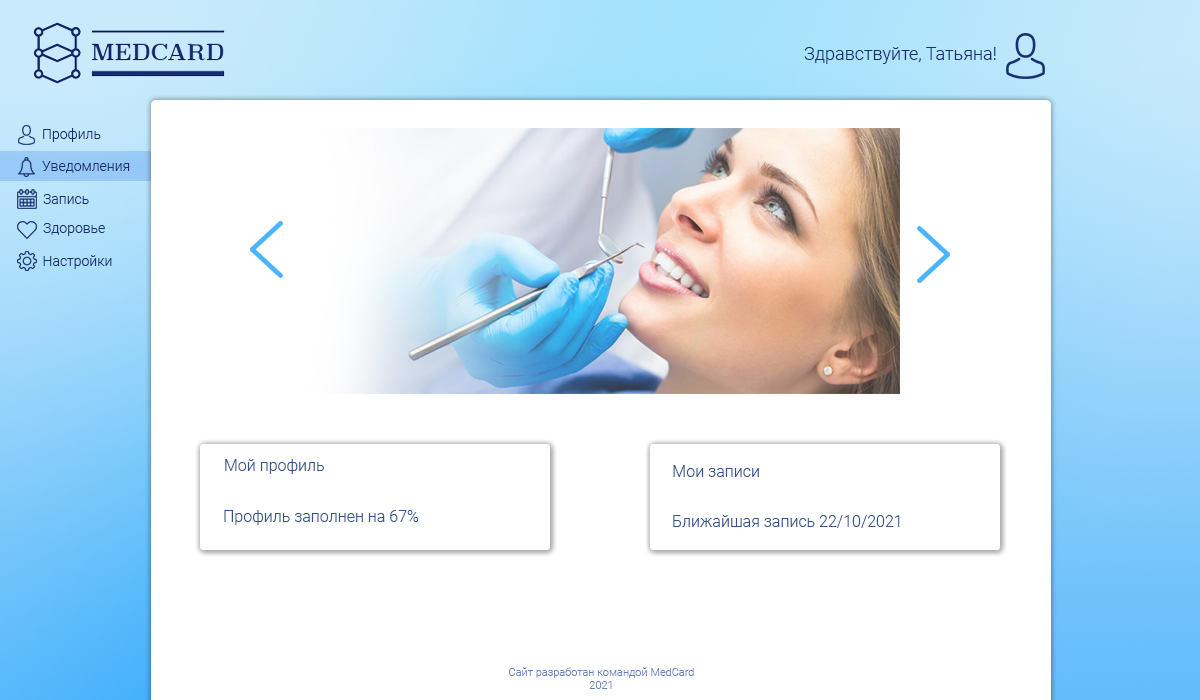
<style>
.page{position:relative;width:1200px;height:700px;background:#ffffff}
.page>*{position:absolute;margin:0}
.t1{font:18px "Roboto-Light";color:#152f70}
.t2{font:14px "Roboto-Light";color:#152f70}
.t3{font:16px "Roboto-Light";color:#35538d}
.t4{font:11px "Roboto-Light";color:#6683bb}
</style>
<div class="page">
<p class="t1" style="left:804px;top:47px;width:192px;height:17px">Здравствуйте, Татьяна!</p>
<p class="t2" style="left:43px;top:128px;width:58px;height:14px">Профиль</p>
<p class="t2" style="left:42px;top:161px;width:88px;height:12px">Уведомления</p>
<p class="t2" style="left:43px;top:194px;width:46px;height:10px">Запись</p>
<p class="t2" style="left:43px;top:223px;width:62px;height:13px">Здоровье</p>
<p class="t2" style="left:43px;top:255px;width:69px;height:14px">Настройки</p>
<p class="t3" style="left:225px;top:459px;width:99px;height:15px">Мой профиль</p>
<p class="t3" style="left:673px;top:465px;width:86px;height:12px">Мои записи</p>
<p class="t3" style="left:224px;top:510px;width:195px;height:15px">Профиль заполнен на 67%</p>
<p class="t3" style="left:673px;top:515px;width:227px;height:13px">Ближайшая запись 22/10/2021</p>
<p class="t4" style="left:509px;top:667px;width:185px;height:22px;text-align:center">Сайт разработан командой MedCard<br>2021</p>
</div>
